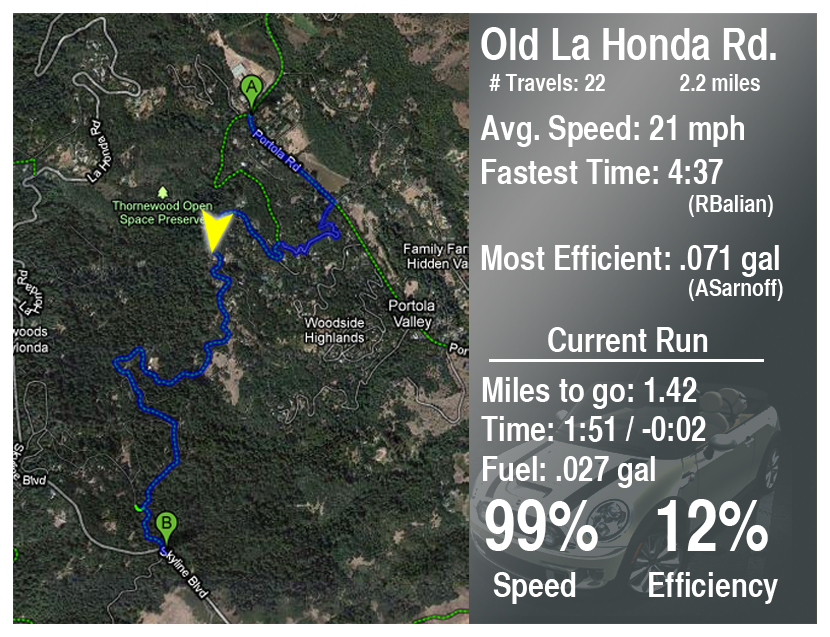
<style>
.page{position:relative;width:830px;height:637px}
.page>*{position:absolute;margin:0}
.t1{font:43.3px "HelveticaCYBold";color:#ffffff}
.t2{font:23.3px "HelveticaCYBold";color:#ffffff}
.t3{font:33.8px "HelveticaCYBold";color:#ffffff}
.t4{font:23.7px "HelveticaCYBold";color:#ffffff}
.t5{font:70.1px "HelveticaCYBold";color:#ffffff}
</style>
<div class="page">
<p class="t1" style="left:481px;top:27px;width:295px;height:33px">Old La Honda Rd.</p>
<p class="t2" style="left:489px;top:74px;width:116px;height:17px"># Travels: 22</p>
<p class="t2" style="left:680px;top:74px;width:80px;height:17px">2.2 miles</p>
<p class="t3" style="left:480px;top:115px;width:264px;height:32px">Avg. Speed: 21 mph</p>
<p class="t3" style="left:482px;top:159px;width:241px;height:25px">Fastest Time: 4:37</p>
<p class="t4" style="left:689px;top:195px;width:84px;height:22px">(RBalian)</p>
<p class="t3" style="left:481px;top:245px;width:298px;height:32px">Most Efficient: .071 gal</p>
<p class="t4" style="left:689px;top:279px;width:94px;height:22px">(ASarnoff)</p>
<p class="t3" style="left:548px;top:327px;width:160px;height:25px">Current Run</p>
<p class="t3" style="left:482px;top:377px;width:215px;height:32px">Miles to go: 1.42</p>
<p class="t3" style="left:481px;top:416px;width:225px;height:26px">Time: 1:51 / -0:02</p>
<p class="t3" style="left:483px;top:456px;width:172px;height:32px">Fuel: .027 gal</p>
<p class="t5" style="left:485px;top:499px;width:113px;height:52px">99%</p>
<p class="t5" style="left:657px;top:499px;width:111px;height:52px">12%</p>
<p class="t3" style="left:493px;top:572px;width:83px;height:32px">Speed</p>
<p class="t3" style="left:649px;top:572px;width:129px;height:32px">Efficiency</p>
</div>
